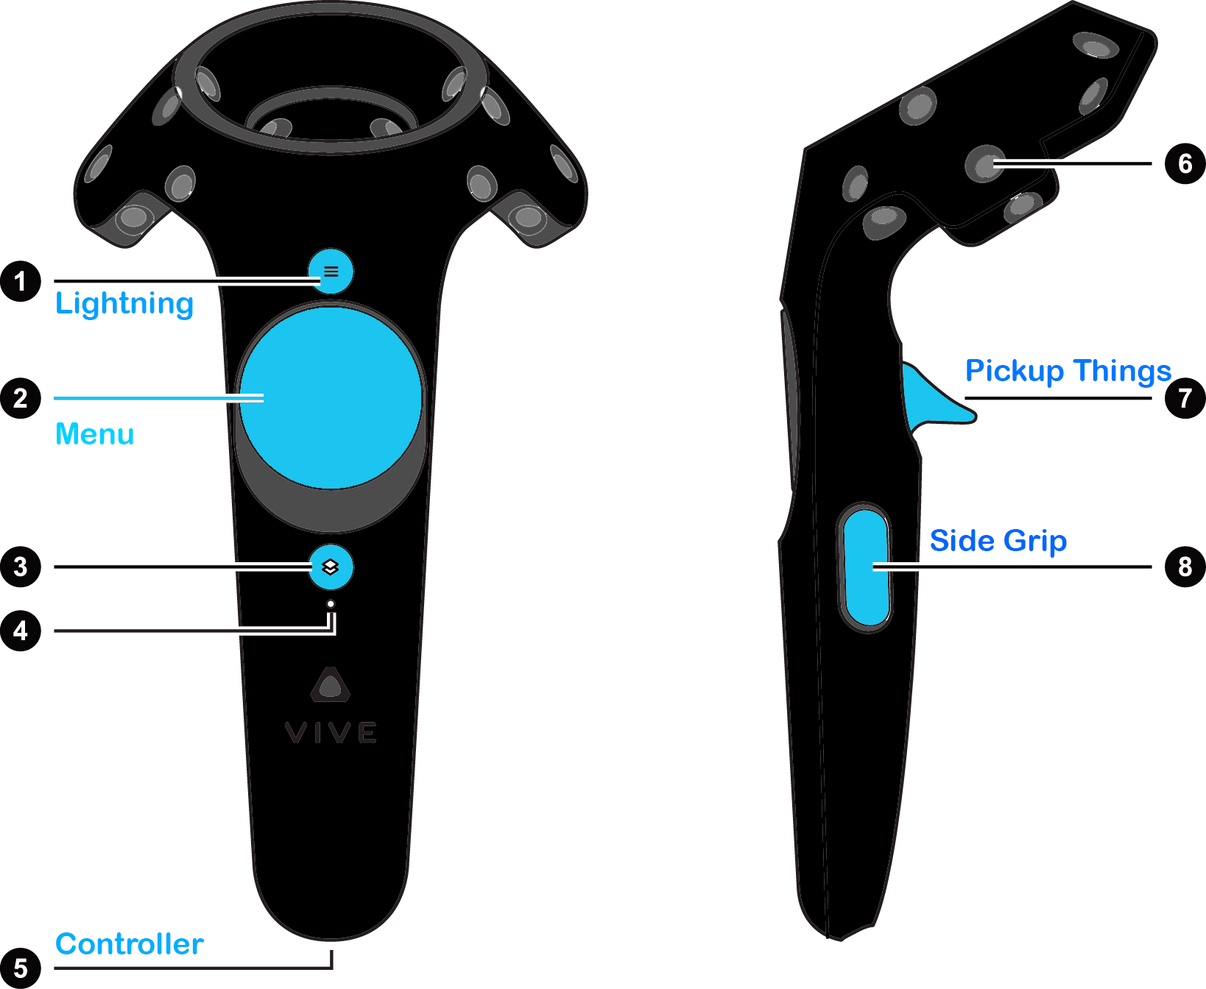
<style>
.page{position:relative;width:1206px;height:989px;background:#ffffff}
.page>*{position:absolute;margin:0}
.t1{font:30.7px "ArialRoundedMTBold";color:#00a2ff}
.t2{font:30.7px "ArialRoundedMTBold";color:#0078ff}
.t3{font:30.7px "ArialRoundedMTBold";color:#00d2ff}
.t4{font:30.7px "ArialRoundedMTBold";color:#0066ff}
.t5{font:30.7px "ArialRoundedMTBold";color:#00aeff}
</style>
<div class="page">
<p class="t1" style="left:57px;top:291px;width:136px;height:29px">Lightning</p>
<p class="t2" style="left:966px;top:359px;width:205px;height:29px">Pickup Things</p>
<p class="t3" style="left:57px;top:422px;width:76px;height:23px">Menu</p>
<p class="t4" style="left:930px;top:529px;width:136px;height:29px">Side Grip</p>
<p class="t5" style="left:56px;top:932px;width:149px;height:23px">Controller</p>
</div>
